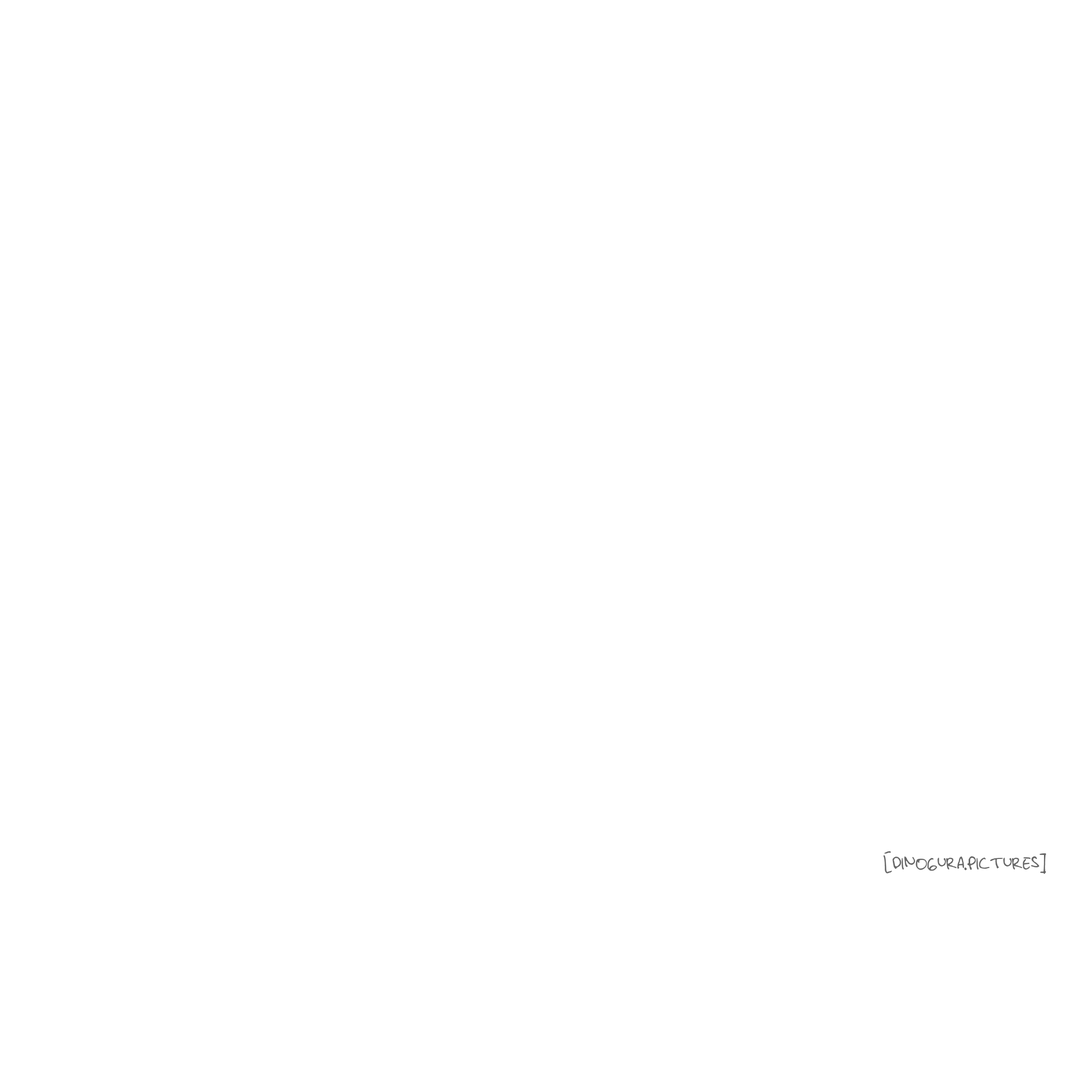
<style>
.page{position:relative;width:1092px;height:1092px;background:#ffffff}
.page>*{position:absolute;margin:0}
.t1{font:30.3px "MikhailAntonov";color:#676767}
</style>
<div class="page">
<p class="t1" style="left:883px;top:851px;width:163px;height:23px">[dinogura.pictures]</p>
</div>
